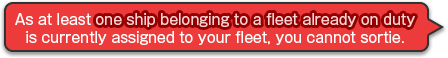
<style>
.page{position:relative;width:448px;height:58px;background:#ed3b3b}
.page>*{position:absolute;margin:0}
.t1{font:14px/18px "GothicMB101Pro-Regular";color:#ffffff}
.t2{font:14px/18px "GothicMB101Pro-Regular";color:#ffd3d3}
</style>
<div class="page">
<p class="t1" style="left:15px;top:13px;width:400px;height:32px;text-align:center">As at least <span class="t2">one ship belonging to a fleet already on duty</span><br>is currently assigned to your fleet, you cannot sortie.</p>
<p class="t1" style="left:15px;top:13px;width:400px;height:32px;text-align:center">As at least <span class="t2">one ship belonging to a fleet already on duty</span><br>is currently assigned to your fleet, you cannot sortie.</p>
</div>
